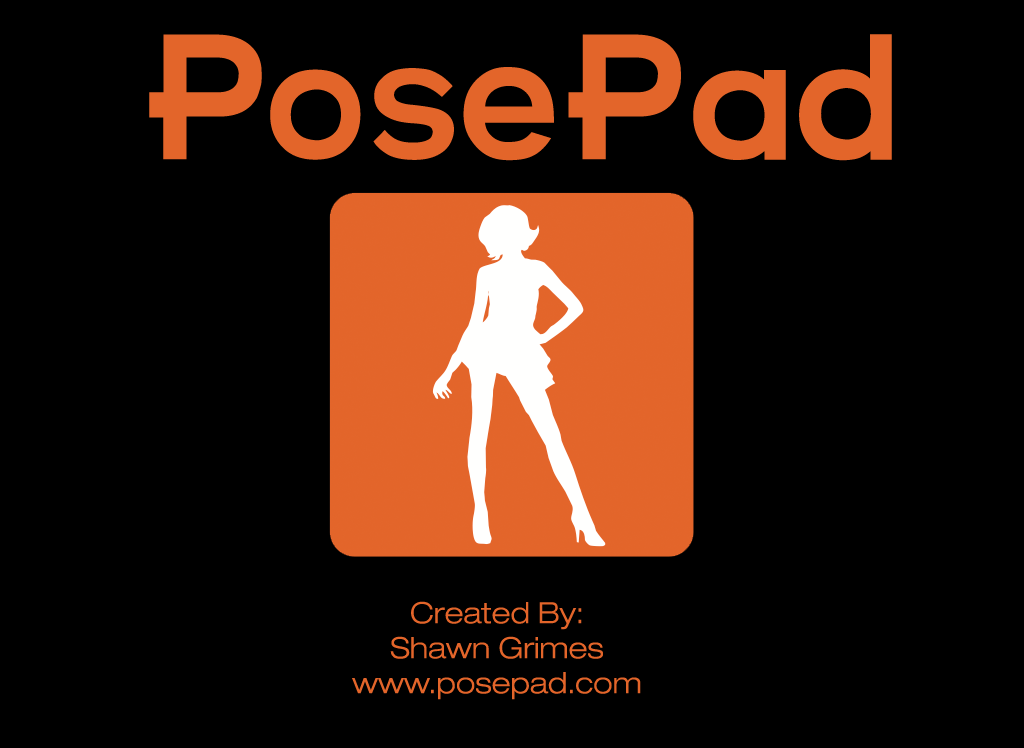
<style>
.page{position:relative;width:1024px;height:748px;background:#000000}
.page>*{position:absolute;margin:0}
.t1{font:150px "Futurama-Bold-Font";color:#e3652a}
.t2{font:29.2px "Helvetica43-ExtendedLight";color:#e3652a}
</style>
<div class="page">
<p class="t1" style="left:149px;top:34px;width:743px;height:127px">PosePad</p>
<p class="t2" style="left:352px;top:601px;width:289px;height:99px;text-align:center">Created By:<br>Shawn Grimes<br>www.posepad.com</p>
</div>
